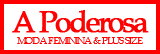
<style>
.page{position:relative;width:160px;height:54px;background:#ffffff}
.page>*{position:absolute;margin:0}
.t1{font:30px "BookAntiqua";letter-spacing:-0.1em;color:#fe0101;font-weight:bold}
.t2{font:10px "BookAntiqua";letter-spacing:-0.1em;color:#ff0000;text-transform:uppercase}
</style>
<div class="page">
<p class="t1" style="left:12px;top:10px;width:137px;height:23px">A Poderosa</p>
<p class="t2" style="left:17px;top:37px;width:126px;height:7px">moda feminina &amp; plus size</p>
</div>
